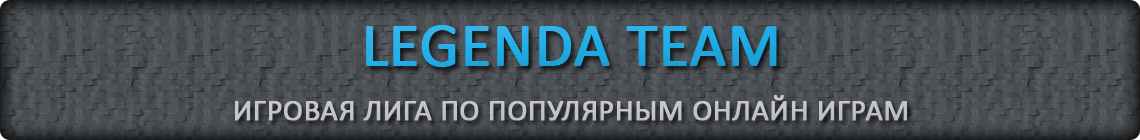
<style>
.page{position:relative;width:1140px;height:140px}
.page>*{position:absolute;margin:0}
.t1{font:62px "Calibri";color:#1fade8;font-weight:bold}
.t2{font:30px "Calibri";color:#c6c6c6;font-weight:bold}
</style>
<div class="page">
<p class="t1" style="left:366px;top:25px;width:411px;height:42px">LEGENDA TEAM</p>
<p class="t2" style="left:235px;top:95px;width:672px;height:26px">ИГРОВАЯ ЛИГА ПО ПОПУЛЯРНЫМ ОНЛАЙН ИГРАМ</p>
</div>
